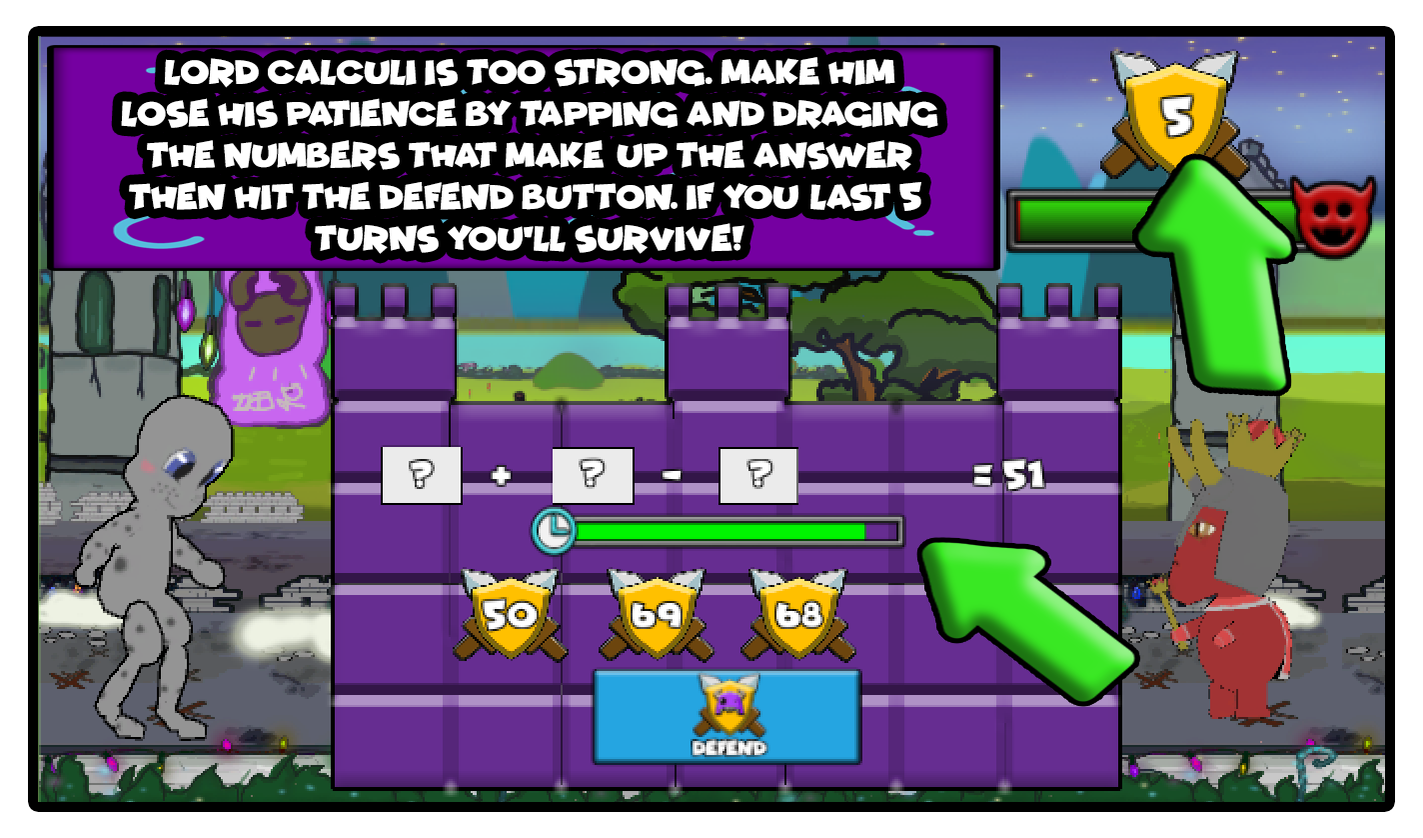
<style>
.page{position:relative;width:1423px;height:838px}
.page>*{position:absolute;margin:0}
.t1{font:34.7px "Funhouse";color:#ffffff}
</style>
<div class="page">
<p class="t1" style="left:121px;top:57px;width:818px;height:197px;text-align:center">LORD CALCULI IS TOO STRONG. MAKE HIM<br>LOSE HIS PATIENCE BY TAPPING AND DRAGING<br>THE NUMBERS THAT MAKE UP THE ANSWER<br>THEN HIT THE DEFEND BUTTON. IF YOU LAST 5 <br>TURNS YOU’LL SURVIVE!</p>
</div>
